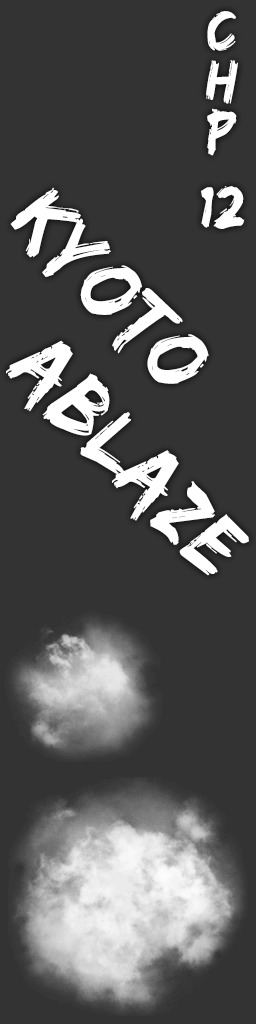
<style>
.page{position:relative;width:256px;height:1024px;background:#333333}
.page>*{position:absolute;margin:0}
.t1{font:60px/25.1px "EdoSZ";letter-spacing:0.03em;color:#ffffff}
.t2{font:90.5px "EdoSZ";letter-spacing:0.03em;color:#ffffff;scale:0.95 1}
</style>
<div class="page">
<p class="t1" style="left:201px;top:11px;width:44px;height:218px;text-align:center">C<br><br>H<br><br>P<br><br><br>12</p>
<p class="t2" style="left:10px;top:187px;width:199px;height:197px;rotate:46deg">Kyoto</p>
<p class="t2" style="left:6px;top:340px;width:243px;height:236px;rotate:46deg">Ablaze</p>
</div>
